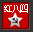
<style>
.page{position:relative;width:33px;height:32px;background:#c50000}
.page>*{position:absolute;margin:0}
.t1{font:10.4px "SimSun";letter-spacing:-0.25em;color:#ffffff}
</style>
<div class="page">
<p class="t1" style="left:4px;top:4px;width:24px;height:9px">红八四</p>
</div>
